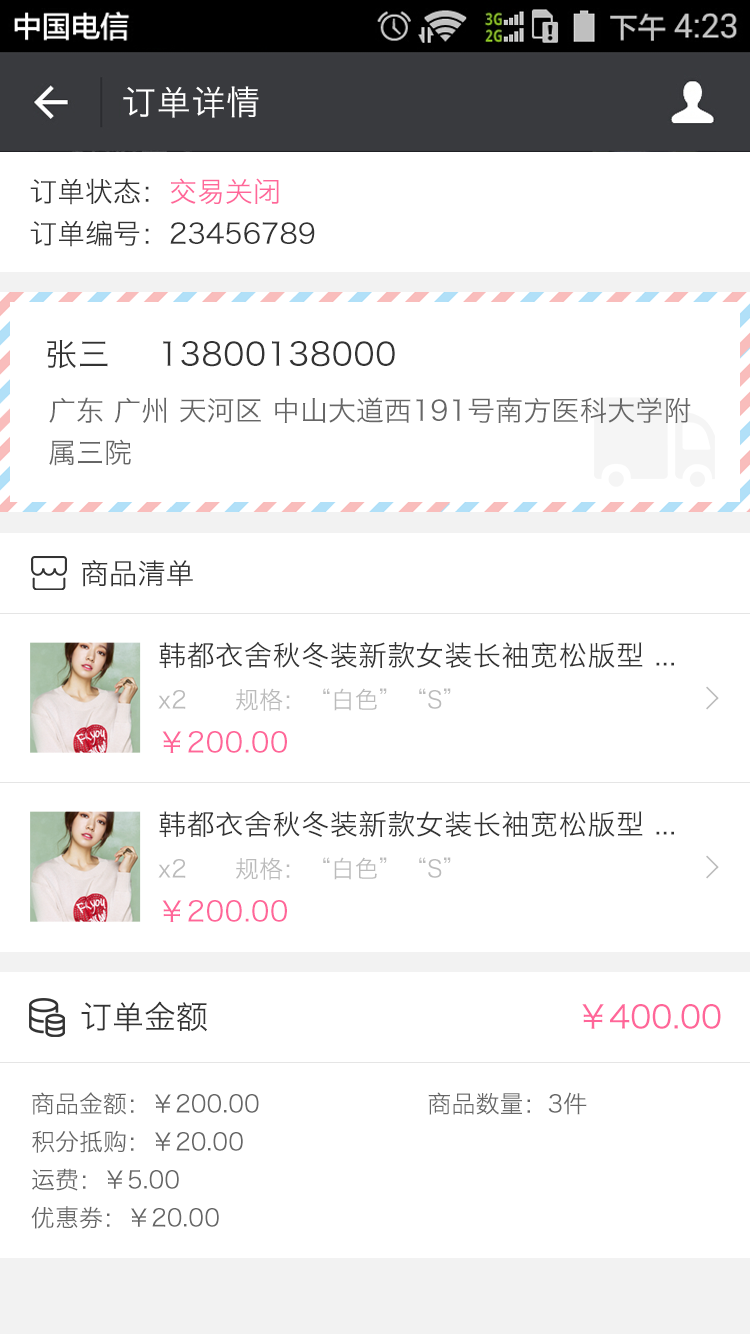
<style>
.page{position:relative;width:750px;height:1334px;background:#ffffff}
.page>*{position:absolute;margin:0}
.t1{font:34px "HiraginoSansGB-W3";letter-spacing:0.022em;color:#ffffff}
.t2{font:28px/40px "HiraginoSansGB-W3";color:#333333}
.t3{font:28px/40px "HiraginoSansGB-W3";color:#ff6699}
.t4{font:32px "HiraginoSansGB-W3";letter-spacing:0.022em;color:#333333}
.t5{font:28px/40px "HiraginoSansGB-W3";color:#666666}
.t6{font:28.6px "HiraginoSansGB-W3";color:#333333}
.t7{font:28px "HiraginoSansGB-W3";letter-spacing:0.022em;color:#333333}
.t8{font:24px "HiraginoSansGB-W3";color:#bbbbbb}
.t9{font:32px "SimSun";color:#bbbbbb;font-weight:bold}
.t10{font:28px "HiraginoSansGB-W3";letter-spacing:0.022em;color:#ff6699}
.t11{font:32px "HiraginoSansGB-W3";color:#333333}
.t12{font:32px "HiraginoSansGB-W3";color:#ff6699}
.t13{font:24px/36px "HiraginoSansGB-W3";color:#666666}
</style>
<div class="page">
<p class="t1" style="left:123px;top:86px;width:136px;height:32px">订单详情</p>
<p class="t2" style="left:30px;top:178px;width:285px;height:69px">订单状态：<span class="t3">交易关闭<br></span>订单编号：23456789</p>
<p class="t4" style="left:47px;top:340px;width:61px;height:29px">张三</p>
<p class="t4" style="left:163px;top:341px;width:232px;height:26px">13800138000</p>
<p class="t5" style="left:49px;top:397px;width:642px;height:69px">广东 广州 天河区 中山大道西191号南方医科大学附<br>属三院</p>
<p class="t6" style="left:82px;top:560px;width:111px;height:27px">商品清单</p>
<p class="t7" style="left:159px;top:641px;width:515px;height:27px">韩都衣舍秋冬装新款女装长袖宽松版型 ...</p>
<p class="t8" style="left:158px;top:688px;width:293px;height:23px">x2      规格：“白色”“S”</p>
<p class="t9" style="left:706px;top:686px;width:13px;height:24px">&gt;</p>
<p class="t10" style="left:162px;top:731px;width:125px;height:22px">￥200.00</p>
<p class="t7" style="left:159px;top:810px;width:515px;height:27px">韩都衣舍秋冬装新款女装长袖宽松版型 ...</p>
<p class="t8" style="left:158px;top:857px;width:293px;height:23px">x2      规格：“白色”“S”</p>
<p class="t9" style="left:706px;top:855px;width:13px;height:24px">&gt;</p>
<p class="t10" style="left:162px;top:900px;width:125px;height:22px">￥200.00</p>
<p class="t11" style="left:81px;top:1001px;width:126px;height:31px">订单金额</p>
<p class="t12" style="left:582px;top:1004px;width:139px;height:25px">￥400.00</p>
<p class="t13" style="left:31px;top:1092px;width:556px;height:137px">商品金额：￥200.00                     商品数量：3件<br>积分抵购：￥20.00<br>运费：￥5.00<br>优惠券：￥20.00</p>
</div>
